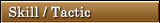
<style>
.page{position:relative;width:160px;height:23px}
.page>*{position:absolute;margin:0}
.t1{font:13.3px "CenturySchoolbook";letter-spacing:0.025em;color:#ffffff}
</style>
<div class="page">
<p class="t1" style="left:9px;top:6px;width:81px;height:11px">Skill / Tactic</p>
</div>
